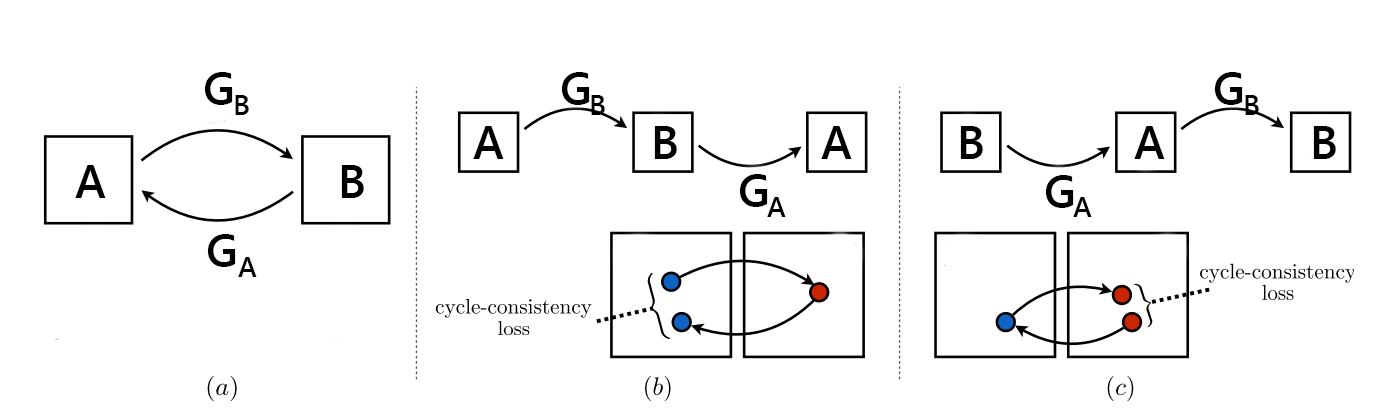
<style>
.page{position:relative;width:1389px;height:414px;background:#ffffff}
.page>*{position:absolute;margin:0}
.t1{font:46px "SegoeUI-Semibold";color:#000000}
.t2{font:28px "SegoeUI-Semibold";color:#000000}
</style>
<div class="page">
<p class="t1" style="left:204px;top:72px;width:29px;height:33px">G</p>
<p class="t1" style="left:561px;top:72px;width:29px;height:33px">G</p>
<p class="t1" style="left:1214px;top:72px;width:29px;height:33px">G</p>
<p class="t2" style="left:235px;top:95px;width:14px;height:20px">B</p>
<p class="t2" style="left:591px;top:95px;width:14px;height:20px">B</p>
<p class="t2" style="left:1245px;top:95px;width:14px;height:20px">B</p>
<p class="t1" style="left:473px;top:126px;width:31px;height:33px">A</p>
<p class="t1" style="left:654px;top:126px;width:23px;height:33px">B</p>
<p class="t1" style="left:821px;top:126px;width:31px;height:33px">A</p>
<p class="t1" style="left:960px;top:126px;width:23px;height:33px">B</p>
<p class="t1" style="left:1134px;top:126px;width:31px;height:33px">A</p>
<p class="t1" style="left:1313px;top:126px;width:23px;height:33px">B</p>
<p class="t1" style="left:75px;top:165px;width:31px;height:33px">A</p>
<p class="t1" style="left:341px;top:165px;width:23px;height:33px">B</p>
<p class="t1" style="left:739px;top:174px;width:29px;height:33px">G</p>
<p class="t1" style="left:1045px;top:175px;width:29px;height:33px">G</p>
<p class="t2" style="left:767px;top:197px;width:19px;height:20px">A</p>
<p class="t2" style="left:1073px;top:197px;width:19px;height:20px">A</p>
<p class="t1" style="left:207px;top:234px;width:29px;height:33px">G</p>
<p class="t2" style="left:238px;top:257px;width:19px;height:20px">A</p>
</div>
